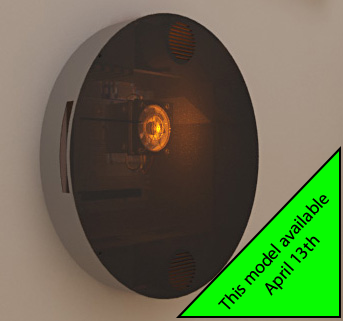
<style>
.page{position:relative;width:343px;height:321px}
.page>*{position:absolute;margin:0}
.t1{font:18px "MyriadPro-Regular";color:#000000}
</style>
<div class="page">
<p class="t1" style="left:218px;top:195px;width:111px;height:115px;text-align:center;rotate:-48deg">This model available <br>April 13th</p>
</div>
